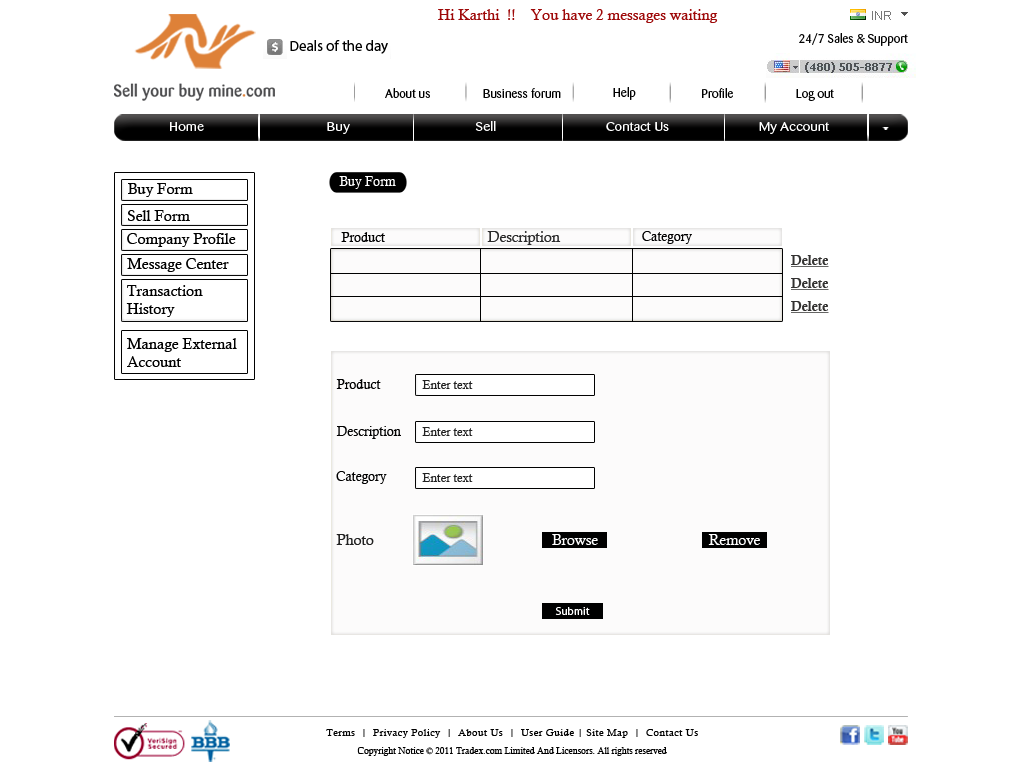
<style>
.page{position:relative;width:1024px;height:768px;background:#ffffff}
.page>*{position:absolute;margin:0}
.t1{font:15px "CalistoMT";color:#9e0909}
.t2{font:14.9px "MyriadPro-Regular";color:#000000}
.t3{font:12px "Barmeno-Regular";color:#030303;scale:1.05 1}
.t4{font:12px "Barmeno-Regular";color:#000000;scale:1.05 1}
.t5{font:12.1px "Barmeno-Regular";color:#ffffff;scale:1.2 1}
.t6{font:15px "CalistoMT";color:#000000}
.t7{font:13px "CalistoMT";color:#ffffff}
.t8{font:13px "CalistoMT";color:#010101}
.t9{font:14.6px "CalistoMT";color:#2b2b2b}
.t10{font:13px "CalisMTBol";color:#333231;text-decoration:underline}
.t11{font:12px "CalistoMT";color:#222222}
.t12{font:14.6px "CalistoMT";color:#222222}
.t13{font:14.6px "CalistoMT";color:#ffffff}
.t14{font:11px "MyriadPro-Regular";color:#ffffff}
.t15{font:10px/18px "CalistoMT";letter-spacing:0.045em;color:#000000}
.t16{font:9px/18px "CalistoMT";color:#000000}
</style>
<div class="page">
<p class="t1" style="left:438px;top:9px;width:280px;height:14px">Hi Karthi  !!    You have 2 messages waiting</p>
<p class="t2" style="left:290px;top:40px;width:98px;height:14px">Deals of the day</p>
<p class="t3" style="left:799px;top:33px;width:109px;height:13px">24/7 Sales &amp; Support</p>
<p class="t4" style="left:385px;top:88px;width:45px;height:10px">About us</p>
<p class="t4" style="left:483px;top:88px;width:78px;height:10px">Business forum</p>
<p class="t4" style="left:613px;top:87px;width:23px;height:13px">Help</p>
<p class="t4" style="left:702px;top:88px;width:31px;height:10px">Profile</p>
<p class="t4" style="left:796px;top:89px;width:38px;height:12px">Log out</p>
<p class="t5" style="left:170px;top:121px;width:660px;height:13px">Home                                     Buy                                      Sell                                 Contact Us                           My Account</p>
<p class="t6" style="left:128px;top:183px;width:65px;height:14px">Buy Form</p>
<p class="t7" style="left:339px;top:176px;width:57px;height:13px">Buy Form</p>
<p class="t6" style="left:128px;top:210px;width:62px;height:11px">Sell Form</p>
<p class="t6" style="left:127px;top:233px;width:109px;height:14px">Company Profile</p>
<p class="t8" style="left:341px;top:232px;width:44px;height:10px">Product</p>
<p class="t9" style="left:487px;top:231px;width:74px;height:14px">Description</p>
<p class="t8" style="left:642px;top:231px;width:50px;height:13px">Category</p>
<p class="t10" style="left:791px;top:255px;width:38px;height:12px">Delete</p>
<p class="t6" style="left:127px;top:258px;width:102px;height:14px">Message Center</p>
<p class="t10" style="left:791px;top:278px;width:38px;height:12px">Delete</p>
<p class="t6" style="left:126px;top:285px;width:77px;height:32px">Transaction<br>History</p>
<p class="t10" style="left:791px;top:301px;width:38px;height:12px">Delete</p>
<p class="t6" style="left:127px;top:338px;width:110px;height:29px">Manage External<br>Account</p>
<p class="t8" style="left:336px;top:379px;width:45px;height:10px">Product</p>
<p class="t11" style="left:422px;top:380px;width:51px;height:9px">Enter text</p>
<p class="t8" style="left:336px;top:426px;width:65px;height:13px">Description</p>
<p class="t11" style="left:422px;top:427px;width:51px;height:9px">Enter text</p>
<p class="t8" style="left:336px;top:471px;width:51px;height:13px">Category</p>
<p class="t11" style="left:422px;top:473px;width:51px;height:9px">Enter text</p>
<p class="t12" style="left:336px;top:534px;width:38px;height:11px">Photo</p>
<p class="t13" style="left:552px;top:534px;width:46px;height:11px">Browse</p>
<p class="t13" style="left:708px;top:534px;width:52px;height:11px">Remove</p>
<p class="t14" style="left:555px;top:607px;width:35px;height:8px">Submit</p>
<p class="t15" style="left:326px;top:729px;width:372px;height:27px;text-align:center">Terms  |  Privacy Policy  |  About Us  |  User Guide | Site Map  |  Contact Us<br><span class="t16">Copyright Notice © 2011 Tradex.com Limited And Licensors. All rights reserved</span></p>
</div>
